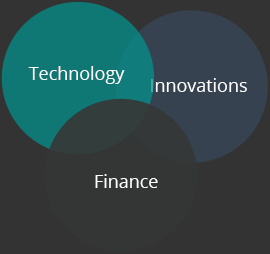
<style>
.page{position:relative;width:270px;height:254px;background:#333333}
.page>*{position:absolute;margin:0}
.t1{font:17.9px "OpenSans";color:#fefeff}
</style>
<div class="page">
<p class="t1" style="left:28px;top:66px;width:97px;height:18px">Technology</p>
<p class="t1" style="left:151px;top:78px;width:96px;height:14px">Innovations</p>
<p class="t1" style="left:95px;top:174px;width:63px;height:14px">Finance</p>
</div>
